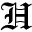
<style>
.page{position:relative;width:32px;height:32px;background:#ffffff}
.page>*{position:absolute;margin:0}
.t1{font:38px "holyunion";color:#000000}
</style>
<div class="page">
<p class="t1" style="left:0px;top:2px;width:32px;height:29px">H</p>
</div>
